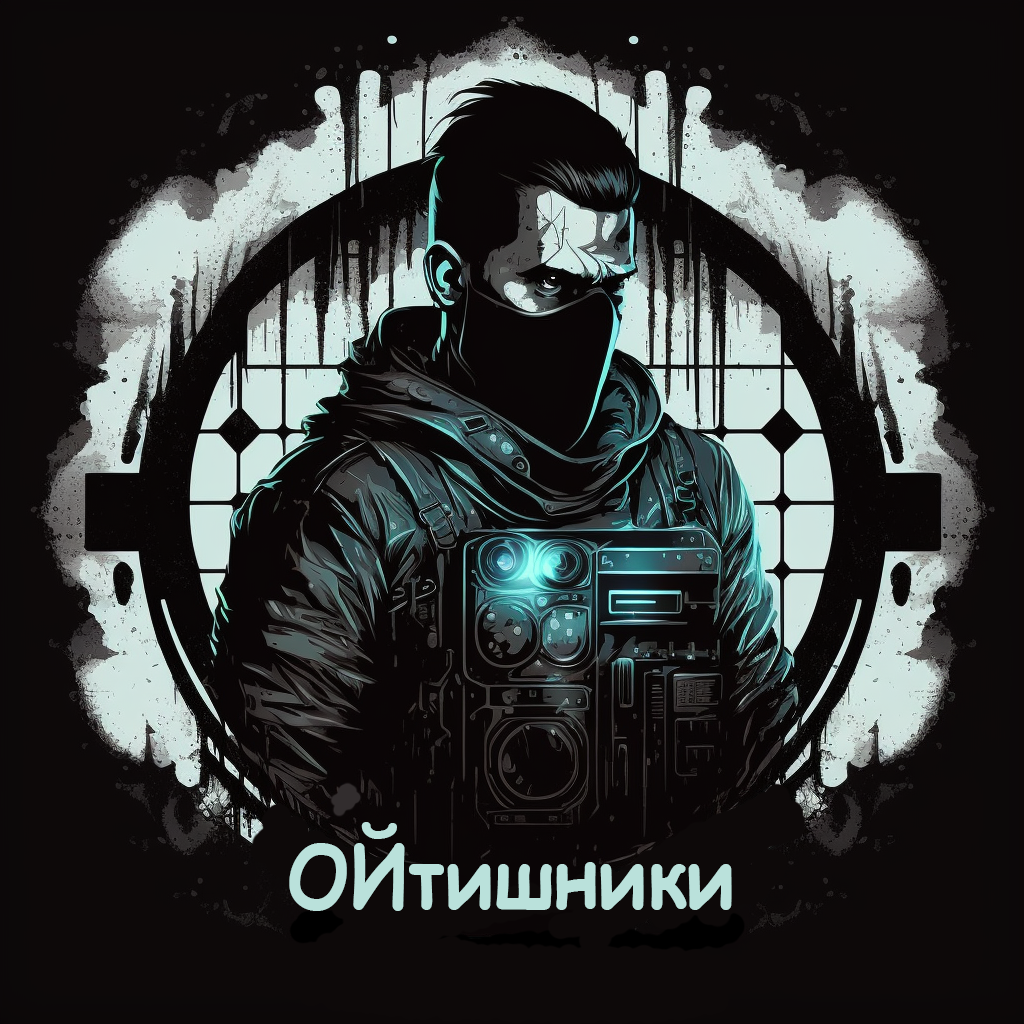
<style>
.page{position:relative;width:1024px;height:1024px}
.page>*{position:absolute;margin:0}
.t1{font:86.2px "ComicSansMS-Bold";color:#bae1db;scale:0.9 1}
</style>
<div class="page">
<p class="t1" style="left:289px;top:822px;width:443px;height:89px">ОЙтишники</p>
</div>
